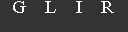
<style>
.page{position:relative;width:128px;height:32px;background:#333333}
.page>*{position:absolute;margin:0}
.t1{font:19.3px "TimesNewRomanPSMT";letter-spacing:1em;color:#ffffff}
</style>
<div class="page">
<p class="t1" style="left:13px;top:1px;width:101px;height:12px">GLIR</p>
</div>
